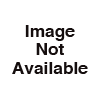
<style>
.page{position:relative;width:100px;height:100px;background:#ffffff}
.page>*{position:absolute;margin:0}
.t1{font:15.6px "Helvetica-Bold";color:#150e0e;scale:1.11 1}
</style>
<div class="page">
<p class="t1" style="left:12px;top:25px;width:76px;height:49px;text-align:center">Image<br>Not<br>Available</p>
</div>
